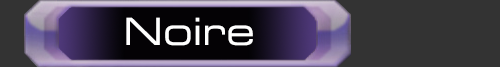
<style>
.page{position:relative;width:500px;height:67px;background:#333333}
.page>*{position:absolute;margin:0}
.t1{font:37.3px "Square721BT-RomanExtended";color:#ffffff}
</style>
<div class="page">
<p class="t1" style="left:126px;top:17px;width:127px;height:29px">Noire</p>
</div>
